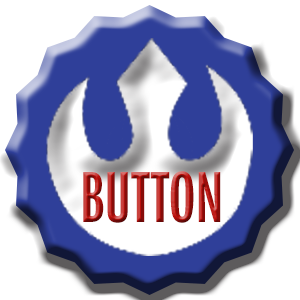
<style>
.page{position:relative;width:300px;height:300px;background:#ffffff}
.page>*{position:absolute;margin:0}
.t1{font:75px "FranklinGothicURWExtComD-Dem"}
</style>
<div class="page">
<p class="t1" style="left:83px;top:171px;width:138px;height:52px">BUTTON</p>
</div>
